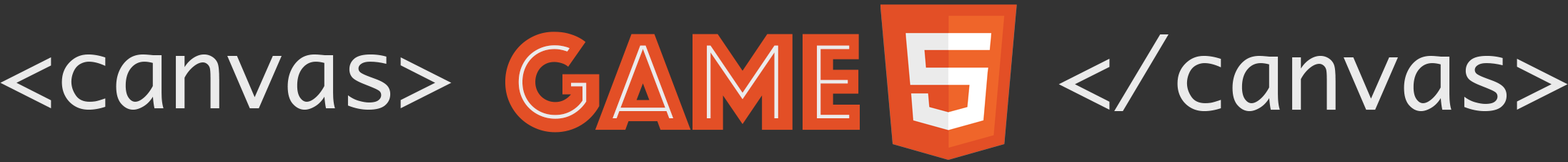
<style>
.page{position:relative;width:1568px;height:162px;background:#333333}
.page>*{position:absolute;margin:0}
.t1{font:142.9px "Phosphate-Inline";color:#e34f26}
.t2{font:95.3px "Monaco";color:#ebebeb}
</style>
<div class="page">
<p class="t1" style="left:505px;top:31px;width:355px;height:101px">GAME</p>
<p class="t2" style="left:1058px;top:34px;width:510px;height:77px">&lt;/canvas&gt;</p>
<p class="t2" style="left:0px;top:54px;width:452px;height:55px">&lt;canvas&gt;</p>
</div>
